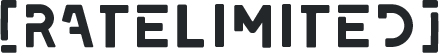
<style>
.page{position:relative;width:439px;height:53px;background:#ffffff}
.page>*{position:absolute;margin:0}
.t1{font:60px "LEIXO-Bold";color:#23272a}
</style>
<div class="page">
<p class="t1" style="left:0px;top:0px;width:439px;height:53px">[RATELIMITED]</p>
</div>
